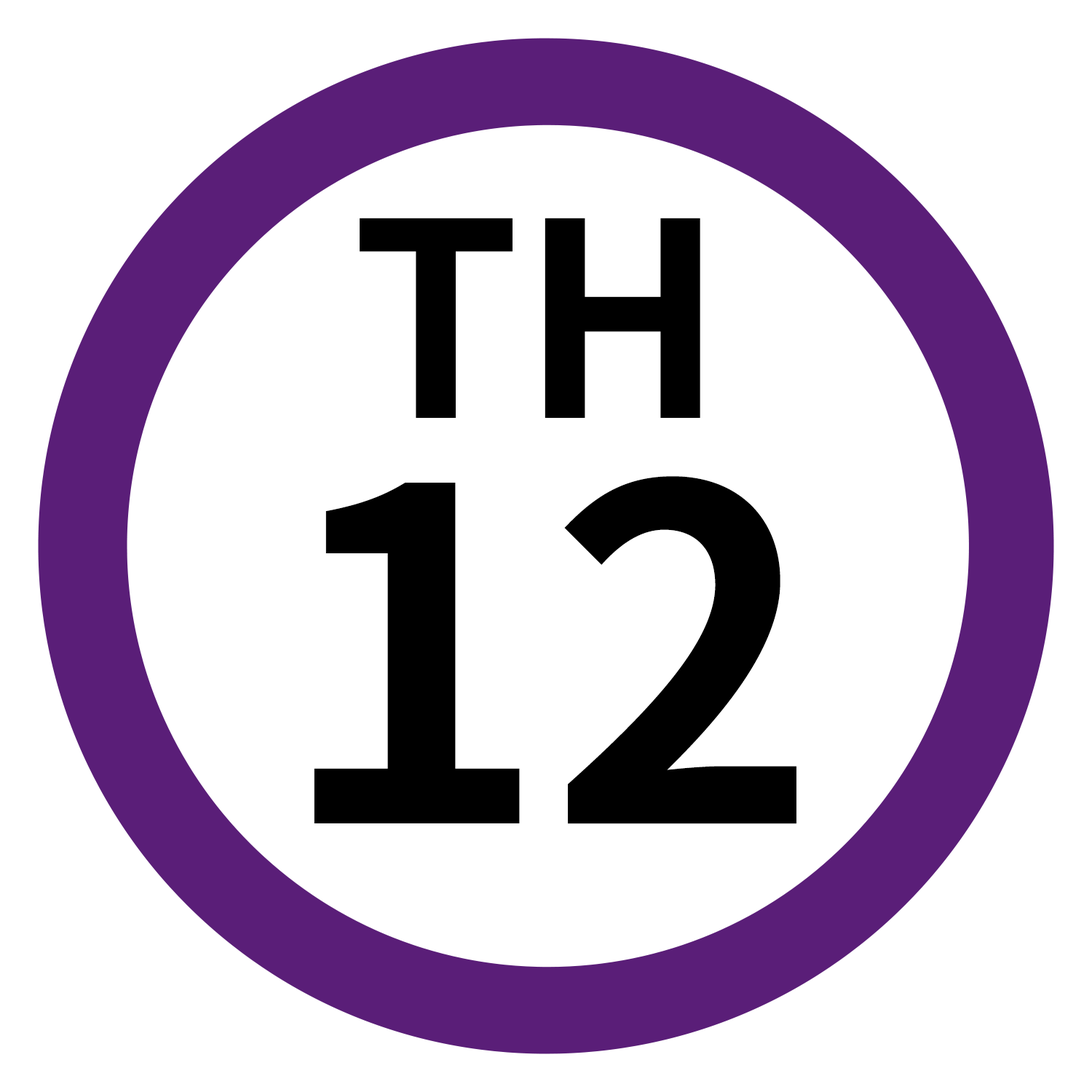
<style>
.page{position:relative;width:1092px;height:1092px;background:#ffffff}
.page>*{position:absolute;margin:0}
.t1{font:269.8px "NotoSansJP-Bold";color:#000000}
.t2{font:460.5px "NotoSansJP-Bold";color:#000000}
</style>
<div class="page">
<p class="t1" style="left:360px;top:218px;width:340px;height:200px">TH</p>
<p class="t2" style="left:314px;top:476px;width:482px;height:348px">12</p>
</div>
